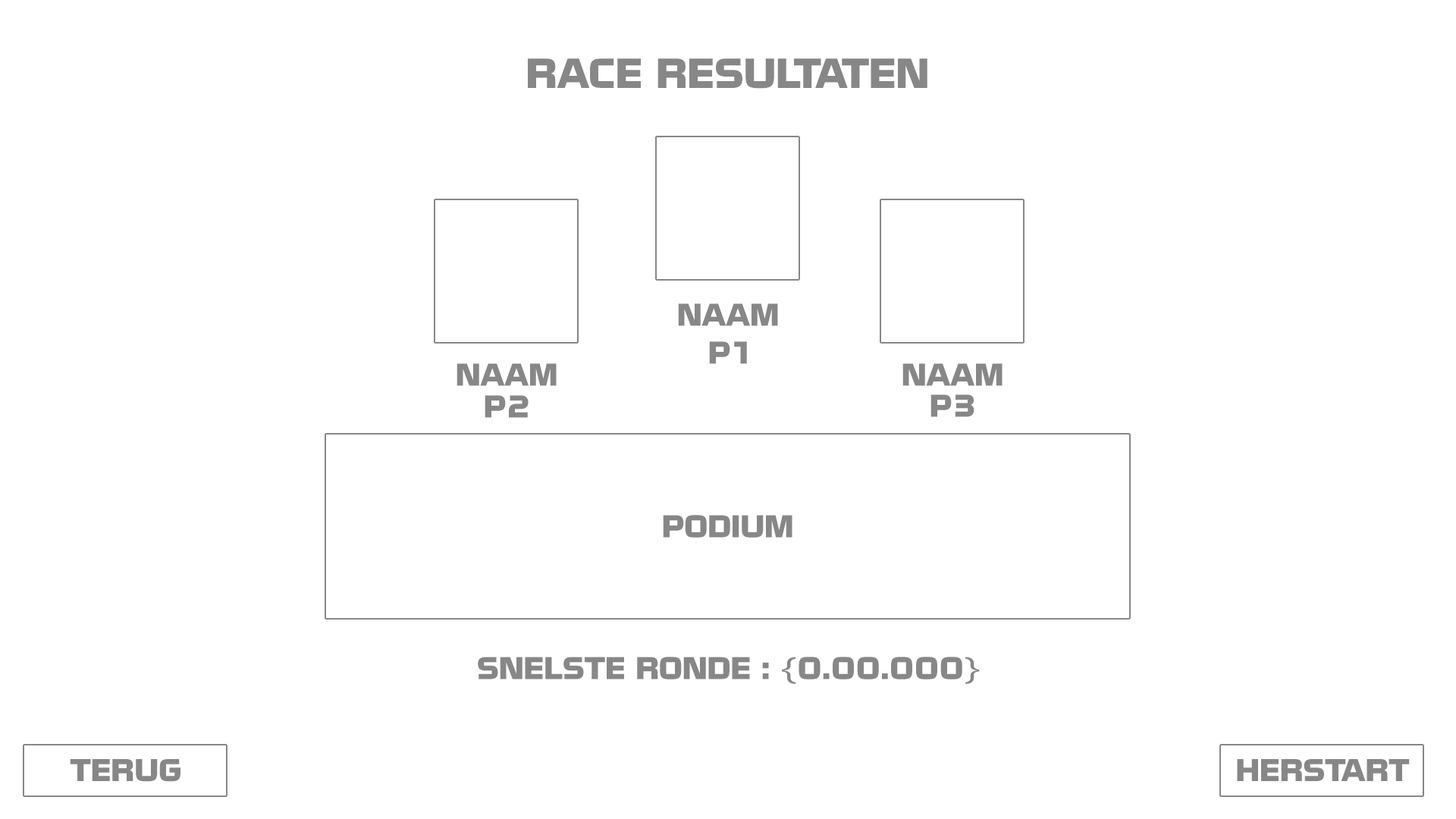
<style>
.page{position:relative;width:1456px;height:819px;background:#ffffff}
.page>*{position:absolute;margin:0}
.t1{font:36.4px "NissanOpti";color:#878787}
.t2{font:27.3px "NissanOpti";color:#878787}
</style>
<div class="page">
<p class="t1" style="left:528px;top:58px;width:399px;height:31px">RACE RESULTATEN</p>
<p class="t2" style="left:678px;top:303px;width:100px;height:23px">NAAM</p>
<p class="t2" style="left:709px;top:341px;width:38px;height:23px">P1</p>
<p class="t2" style="left:457px;top:363px;width:100px;height:23px">NAAM</p>
<p class="t2" style="left:902px;top:363px;width:101px;height:23px">NAAM</p>
<p class="t2" style="left:485px;top:395px;width:44px;height:23px">P2</p>
<p class="t2" style="left:930px;top:394px;width:44px;height:23px">P3</p>
<p class="t2" style="left:663px;top:515px;width:129px;height:23px">PODIUM</p>
<p class="t2" style="left:478px;top:657px;width:502px;height:27px">SNELSTE RONDE : {0.00.000}</p>
<p class="t2" style="left:70px;top:759px;width:110px;height:23px">TERUG</p>
<p class="t2" style="left:1237px;top:759px;width:173px;height:22px">HERSTART</p>
</div>
